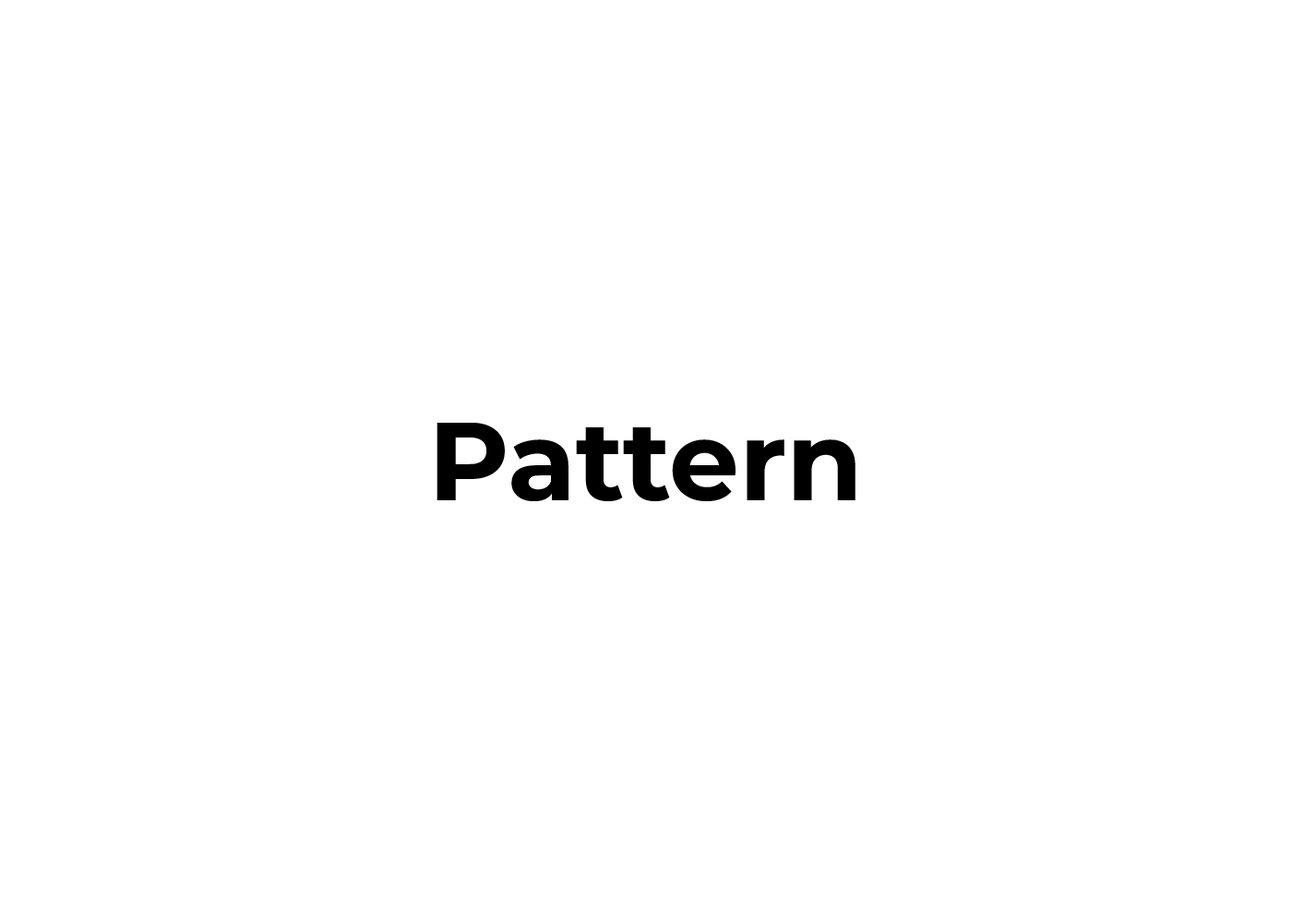
<style>
.page{position:relative;width:1292px;height:923px;background:#ffffff}
.page>*{position:absolute;margin:0}
.t1{font:110.7px "Montserrat-Bold";color:#000000}
</style>
<div class="page">
<p class="t1" style="left:437px;top:423px;width:419px;height:78px">Pattern</p>
</div>
